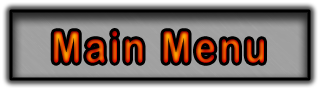
<style>
.page{position:relative;width:321px;height:91px}
.page>*{position:absolute;margin:0}
.t1{font:43.2px "ArialRoundedMTBold";letter-spacing:0.1em;scale:0.83 1}
</style>
<div class="page">
<p class="t1" style="left:53px;top:31px;width:211px;height:32px">Main Menu</p>
</div>
